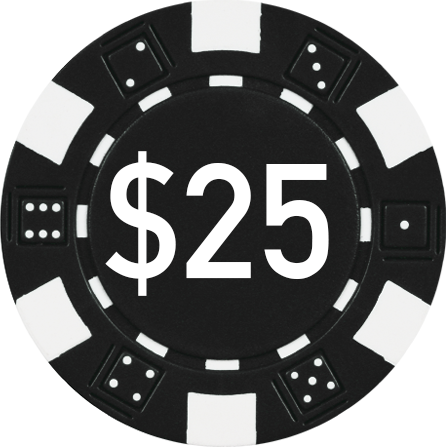
<style>
.page{position:relative;width:446px;height:447px;background:#ffffff}
.page>*{position:absolute;margin:0}
.t1{font:160px "DINAlternate-Bold";color:#ffffff}
</style>
<div class="page">
<p class="t1" style="left:105px;top:151px;width:224px;height:145px">$25</p>
</div>
